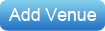
<style>
.page{position:relative;width:105px;height:31px}
.page>*{position:absolute;margin:0}
.t1{font:18px "ArialMT";letter-spacing:-0.01em;color:#ffffff}
</style>
<div class="page">
<p class="t1" style="left:8px;top:8px;width:89px;height:13px">Add Venue</p>
</div>
